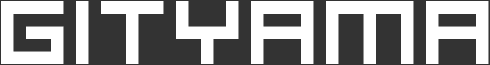
<style>
.page{position:relative;width:490px;height:65px;background:#333333}
.page>*{position:absolute;margin:0}
.t1{font:100px "Hooge0553";color:#ffffff}
</style>
<div class="page">
<p class="t1" style="left:1px;top:1px;width:488px;height:63px">GitYAMA</p>
</div>
